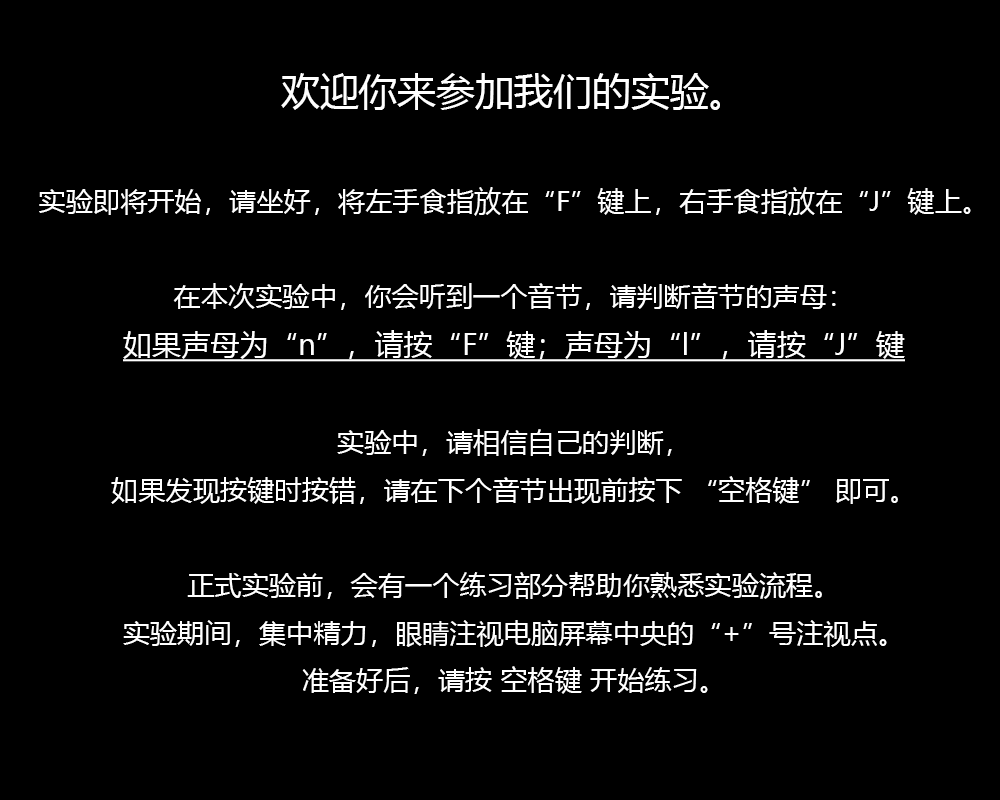
<style>
.page{position:relative;width:1000px;height:800px;background:#000000}
.page>*{position:absolute;margin:0}
.t1{font:27.2px "MicrosoftYaHei";color:#ffffff}
.t2{font:38.9px "MicrosoftYaHei";color:#ffffff}
.t3{font:29.2px "MicrosoftYaHei";color:#ffffff;text-decoration:underline}
</style>
<div class="page">
<p class="t1" style="left:39px;top:73px;width:932px;height:621px;text-align:center"><span class="t2">欢迎你来参加我们的实验。<br></span><br>实验即将开始，请坐好，将左手食指放在“F”键上，右手食指放在“J”键上。<br><br>在本次实验中，你会听到一个音节，请判断音节的声母：<br><span class="t3">如果声母为“n”，请按“F”键；声母为“l”，请按“J”键<br></span><br>实验中，请相信自己的判断，<br>如果发现按键时按错，请在下个音节出现前按下 “空格键” 即可。<br><br>正式实验前，会有一个练习部分帮助你熟悉实验流程。<br>实验期间，集中精力，眼睛注视电脑屏幕中央的“+”号注视点。<br>准备好后，请按 空格键 开始练习。</p>
</div>
